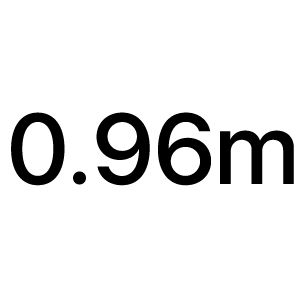
<style>
.page{position:relative;width:300px;height:300px;background:#ffffff}
.page>*{position:absolute;margin:0}
.t1{font:99px "SFUIDisplay-Medium";color:#000000}
</style>
<div class="page">
<p class="t1" style="left:11px;top:112px;width:283px;height:74px">0.96m</p>
</div>
